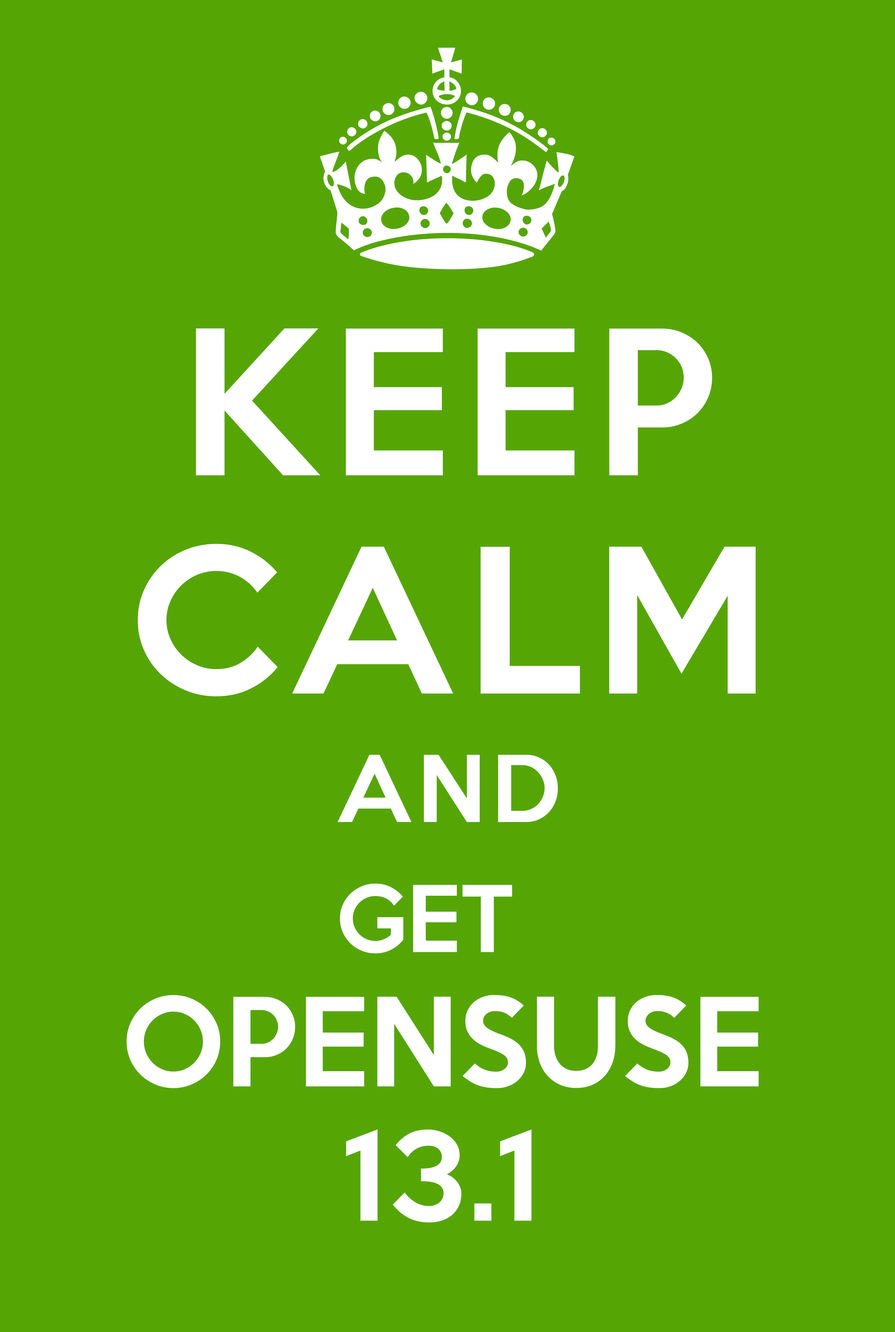
<style>
.page{position:relative;width:895px;height:1332px;background:#55a605}
.page>*{position:absolute;margin:0}
.t1{font:226px "KeepCalm-Medium";letter-spacing:0.07em;color:#ffffff;text-transform:uppercase}
.t2{font:183.5px/218.2px "KeepCalm-Medium";letter-spacing:0.07em;color:#ffffff;text-transform:uppercase}
.t3{font:83.9px "KeepCalm-Medium";letter-spacing:0.07em;color:#ffffff;text-transform:uppercase}
.t4{font:111.9px/218.2px "KeepCalm-Medium";color:#ffffff;text-transform:uppercase}
.t5{font:83.9px/218.2px "KeepCalm-Medium";color:#ffffff;text-transform:uppercase}
</style>
<div class="page">
<p class="t1" style="left:320px;top:48px;width:255px;height:221px">^</p>
<p class="t2" style="left:138px;top:328px;width:618px;height:368px;text-align:center">Keep <br>Calm</p>
<p class="t3" style="left:338px;top:755px;width:220px;height:67px">and</p>
<p class="t4" style="left:126px;top:883px;width:633px;height:339px;text-align:center"><span class="t5">get</span> <br>opensuse<br>13.1</p>
</div>
